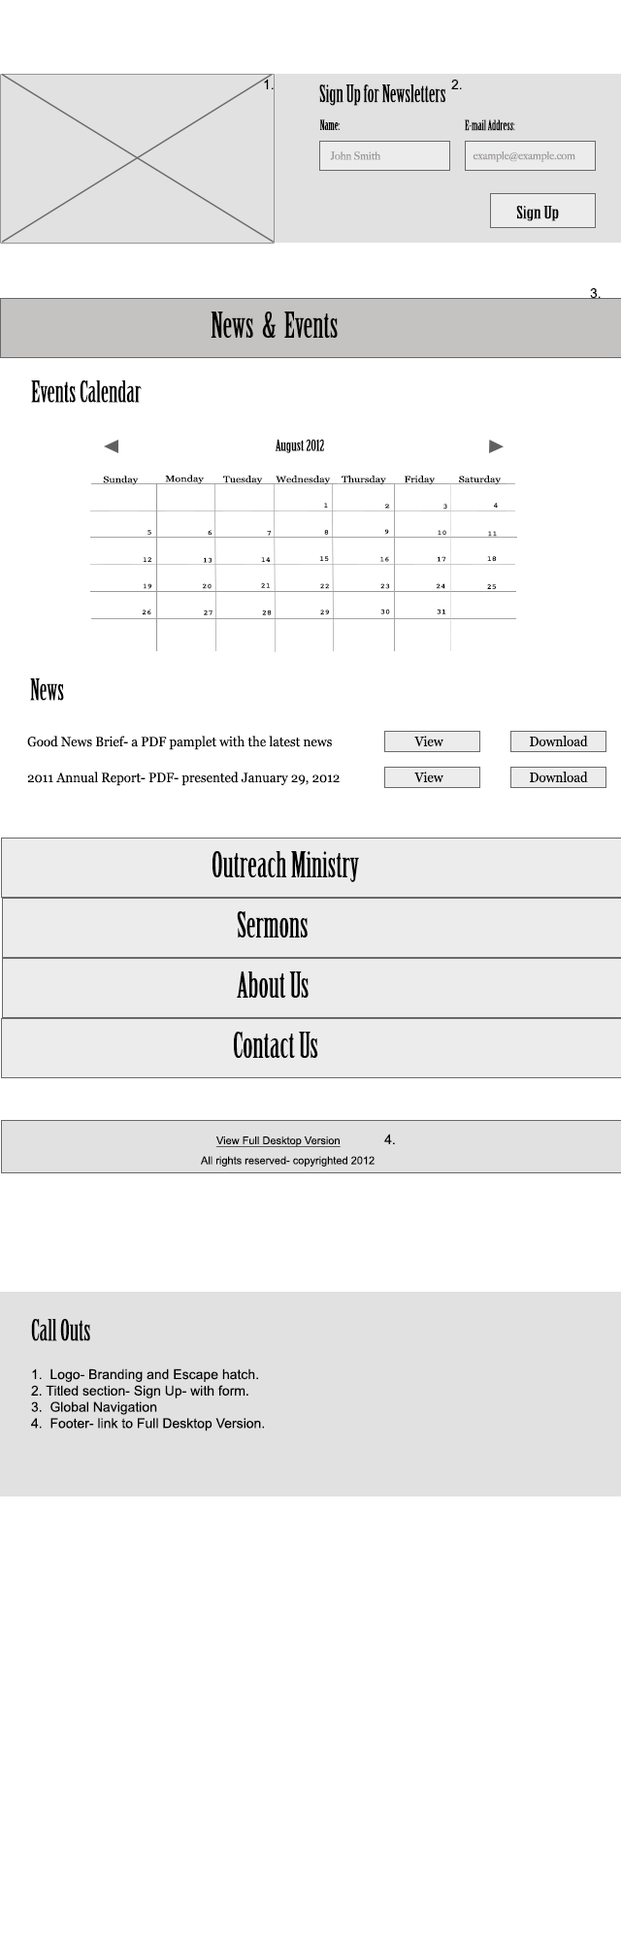
<style>
.page{position:relative;width:621px;height:1941px;background:#ffffff}
.page>*{position:absolute;margin:0}
.t1{font:13.6px "ArialMT";color:#000000}
.t2{font:23.3px "BirchStd";color:#000000}
.t3{font:13.8px "BirchStd";color:#000000}
.t4{font:10.7px "BigCaslon-Medium";color:#9d9999}
.t5{font:16.9px "BirchStd";color:#000000;scale:1.41 1}
.t6{font:34.9px "BirchStd";color:#000000}
.t7{font:29.1px "BirchStd";color:#000000}
.t8{font:15px "BirchStd";color:#000000;scale:1.17 1}
.t9{font:9px "Georgia";color:#000000;scale:1.17 1}
.t10{font:7px "Courier";scale:1.17 1}
.t11{font:7px "Georgia";color:#000000;scale:1.17 1}
.t12{font:7px "Courier";color:#232323;scale:1.17 1}
.t13{font:7px "Courier";color:#000000;scale:1.17 1}
.t14{font:29.1px "BirchStd";color:#000000;scale:0.95 1}
.t15{font:13.6px "Georgia";color:#000000;scale:0.95 1}
.t16{font:10.7px "ArialMT";color:#000000;text-decoration:underline}
.t17{font:10.8px "ArialMT";color:#000000}
</style>
<div class="page">
<p class="t1" style="left:264px;top:79px;width:10px;height:10px">1.</p>
<p class="t2" style="left:319px;top:84px;width:126px;height:22px">Sign Up for Newsletters</p>
<p class="t1" style="left:451px;top:79px;width:11px;height:10px">2.</p>
<p class="t3" style="left:319px;top:119px;width:21px;height:11px">Name:</p>
<p class="t3" style="left:465px;top:119px;width:50px;height:12px">E-mail Address:</p>
<p class="t4" style="left:330px;top:151px;width:50px;height:9px">John Smith</p>
<p class="t4" style="left:473px;top:151px;width:102px;height:11px">example@example.com</p>
<p class="t5" style="left:516px;top:206px;width:43px;height:15px">Sign Up</p>
<p class="t1" style="left:590px;top:287px;width:11px;height:12px">3.</p>
<p class="t6" style="left:211px;top:311px;width:127px;height:27px">News  &amp;  Events</p>
<p class="t7" style="left:31px;top:380px;width:111px;height:23px">Events Calendar</p>
<p class="t8" style="left:275px;top:439px;width:49px;height:14px">August 2012</p>
<p class="t9" style="left:103px;top:475px;width:36px;height:10px">Sunday</p>
<p class="t9" style="left:165px;top:474px;width:39px;height:10px">Monday</p>
<p class="t9" style="left:223px;top:475px;width:40px;height:10px">Tuesday</p>
<p class="t9" style="left:276px;top:475px;width:55px;height:10px">Wednesday</p>
<p class="t9" style="left:342px;top:475px;width:44px;height:10px">Thursday</p>
<p class="t9" style="left:405px;top:475px;width:30px;height:10px">Friday</p>
<p class="t9" style="left:459px;top:475px;width:42px;height:10px">Saturday</p>
<p class="t10" style="left:324px;top:503px;width:4px;height:4px">1</p>
<p class="t11" style="left:385px;top:504px;width:5px;height:4px">2</p>
<p class="t12" style="left:443px;top:504px;width:4px;height:5px">3</p>
<p class="t13" style="left:494px;top:503px;width:4px;height:4px">4</p>
<p class="t10" style="left:147px;top:530px;width:4px;height:5px">5</p>
<p class="t12" style="left:208px;top:530px;width:4px;height:6px">6</p>
<p class="t13" style="left:267px;top:531px;width:4px;height:5px">7</p>
<p class="t12" style="left:324px;top:530px;width:5px;height:5px">8</p>
<p class="t13" style="left:384px;top:529px;width:5px;height:6px">9</p>
<p class="t10" style="left:438px;top:530px;width:8px;height:6px">10</p>
<p class="t10" style="left:488px;top:531px;width:9px;height:6px">11</p>
<p class="t13" style="left:143px;top:557px;width:8px;height:5px">12</p>
<p class="t13" style="left:203px;top:557px;width:9px;height:6px">13</p>
<p class="t13" style="left:261px;top:557px;width:9px;height:5px">14</p>
<p class="t12" style="left:320px;top:556px;width:9px;height:6px">15</p>
<p class="t12" style="left:380px;top:556px;width:9px;height:6px">16</p>
<p class="t13" style="left:437px;top:556px;width:9px;height:6px">17</p>
<p class="t13" style="left:487px;top:556px;width:10px;height:6px">18</p>
<p class="t13" style="left:143px;top:583px;width:8px;height:6px">19</p>
<p class="t10" style="left:202px;top:583px;width:10px;height:6px">20</p>
<p class="t12" style="left:261px;top:583px;width:9px;height:5px">21</p>
<p class="t13" style="left:320px;top:583px;width:9px;height:6px">22</p>
<p class="t13" style="left:380px;top:583px;width:10px;height:6px">23</p>
<p class="t13" style="left:436px;top:583px;width:9px;height:6px">24</p>
<p class="t13" style="left:487px;top:584px;width:10px;height:5px">25</p>
<p class="t13" style="left:142px;top:609px;width:9px;height:6px">26</p>
<p class="t12" style="left:204px;top:609px;width:8px;height:6px">27</p>
<p class="t12" style="left:262px;top:609px;width:10px;height:6px">28</p>
<p class="t13" style="left:320px;top:609px;width:9px;height:6px">29</p>
<p class="t12" style="left:380px;top:608px;width:10px;height:6px">30</p>
<p class="t13" style="left:437px;top:608px;width:9px;height:6px">31</p>
<p class="t14" style="left:30px;top:678px;width:34px;height:23px">News</p>
<p class="t15" style="left:27px;top:735px;width:305px;height:15px">Good News Brief- a PDF pamplet with the latest news</p>
<p class="t15" style="left:414px;top:735px;width:29px;height:11px">View</p>
<p class="t15" style="left:530px;top:735px;width:58px;height:11px">Download</p>
<p class="t15" style="left:27px;top:771px;width:313px;height:15px">2011 Annual Report- PDF- presented January 29, 2012</p>
<p class="t15" style="left:414px;top:771px;width:29px;height:11px">View</p>
<p class="t15" style="left:530px;top:771px;width:58px;height:11px">Download</p>
<p class="t6" style="left:212px;top:851px;width:147px;height:31px">Outreach Ministry</p>
<p class="t6" style="left:237px;top:911px;width:71px;height:26px">Sermons</p>
<p class="t6" style="left:237px;top:971px;width:72px;height:26px">About Us</p>
<p class="t6" style="left:234px;top:1031px;width:84px;height:27px">Contact Us</p>
<p class="t1" style="left:384px;top:1133px;width:11px;height:11px">4.</p>
<p class="t16" style="left:216px;top:1136px;width:125px;height:11px">View Full Desktop Version</p>
<p class="t17" style="left:201px;top:1156px;width:174px;height:10px">All rights reserved- copyrighted 2012</p>
<p class="t7" style="left:31px;top:1319px;width:59px;height:22px">Call Outs</p>
<p class="t1" style="left:31px;top:1368px;width:233px;height:63px">1.  Logo- Branding and Escape hatch.<br>2. Titled section- Sign Up- with form.<br>3.  Global Navigation<br>4.  Footer- link to Full Desktop Version.</p>
</div>
